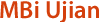
<style>
.page{position:relative;width:106px;height:22px;background:#ffffff}
.page>*{position:absolute;margin:0}
.t1{font:24.8px "MyriadPro-Semibold";color:#d43f0c}
</style>
<div class="page">
<p class="t1" style="left:0px;top:1px;width:99px;height:23px">MBi Ujian</p>
</div>
